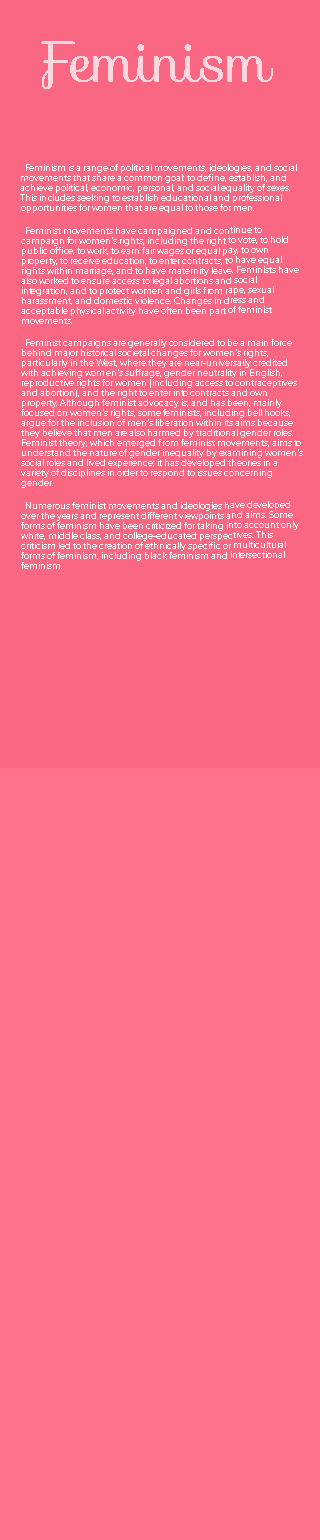
<style>
.page{position:relative;width:320px;height:1540px;background:#ff7289}
.page>*{position:absolute;margin:0}
.t1{font:58.3px "Sofia-Regular";color:#ffd6de}
.t2{font:8.3px "Montserrat-Regular";color:#fff6f7}
</style>
<div class="page">
<p class="t1" style="left:41px;top:41px;width:232px;height:48px">Feminism</p>
<p class="t2" style="left:20px;top:164px;width:283px;height:405px">Feminism is a range of political movements, ideologies, and social movements that share a common goal: to define, establish, and achieve political, economic, personal, and social equality of sexes. This includes seeking to establish educational and professional opportunities for women that are equal to those for men.<br>Feminist movements have campaigned and continue to campaign for women's rights, including the right to vote, to hold public office, to work, to earn fair wages or equal pay, to own property, to receive education, to enter contracts, to have equal rights within marriage, and to have maternity leave. Feminists have also worked to ensure access to legal abortions and social integration, and to protect women and girls from rape, sexual harassment, and domestic violence. Changes in dress and acceptable physical activity have often been part of feminist movements.<br>Feminist campaigns are generally considered to be a main force behind major historical societal changes for women's rights, particularly in the West, where they are near-universally credited with achieving women's suffrage, gender neutrality in English, reproductive rights for women (including access to contraceptives and abortion), and the right to enter into contracts and own property. Although feminist advocacy is, and has been, mainly focused on women's rights, some feminists, including bell hooks, argue for the inclusion of men's liberation within its aims because they believe that men are also harmed by traditional gender roles. Feminist theory, which emerged from feminist movements, aims to understand the nature of gender inequality by examining women's social roles and lived experience; it has developed theories in a variety of disciplines in order to respond to issues concerning gender.<br>Numerous feminist movements and ideologies have developed over the years and represent different viewpoints and aims. Some forms of feminism have been criticized for taking into account only white, middle class, and college-educated perspectives. This criticism led to the creation of ethnically specific or multicultural forms of feminism, including black feminism and intersectional feminism.</p>
</div>
